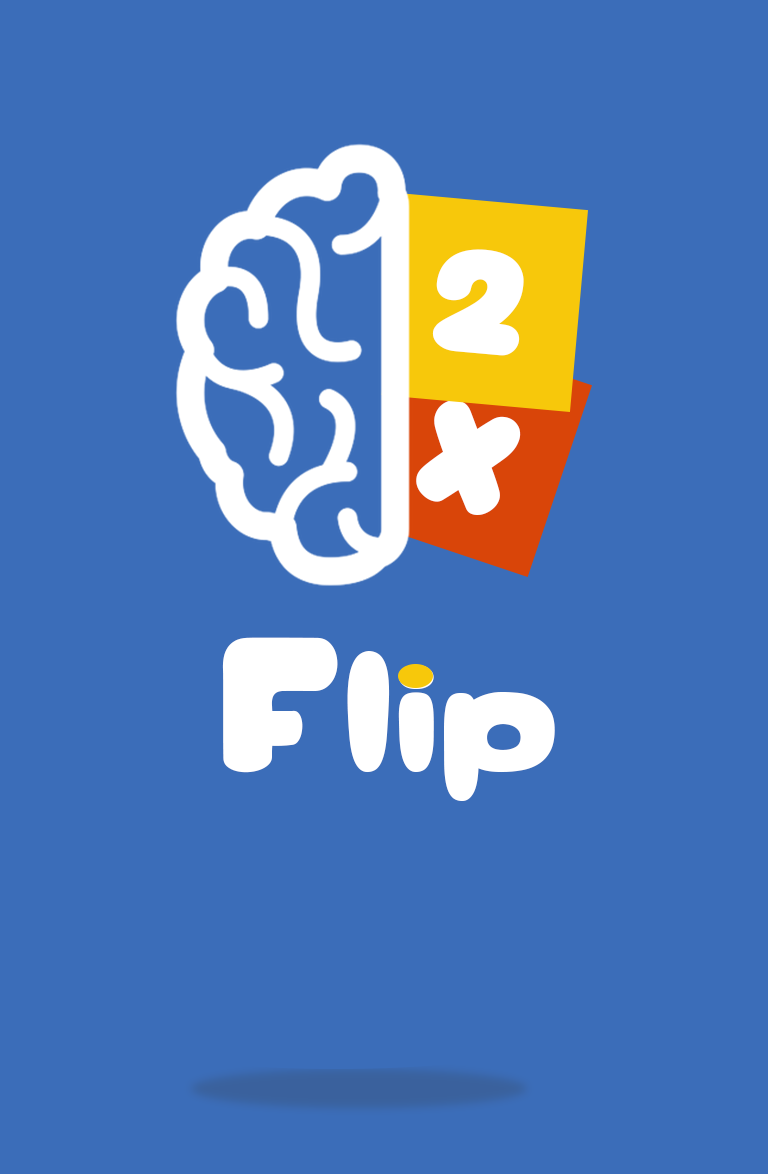
<style>
.page{position:relative;width:768px;height:1174px;background:#3b6db9}
.page>*{position:absolute;margin:0}
.t1{font:146.7px "BirdyGame";color:#ffffff;scale:1.13 1}
.t2{font:189.5px "BirdyGame";color:#ffffff;scale:1.13 1}
</style>
<div class="page">
<p class="t1" style="left:432px;top:249px;width:92px;height:107px;rotate:5deg">2</p>
<p class="t1" style="left:416px;top:400px;width:105px;height:115px;rotate:19deg">X</p>
<p class="t2" style="left:222px;top:637px;width:333px;height:164px">Flip</p>
</div>
